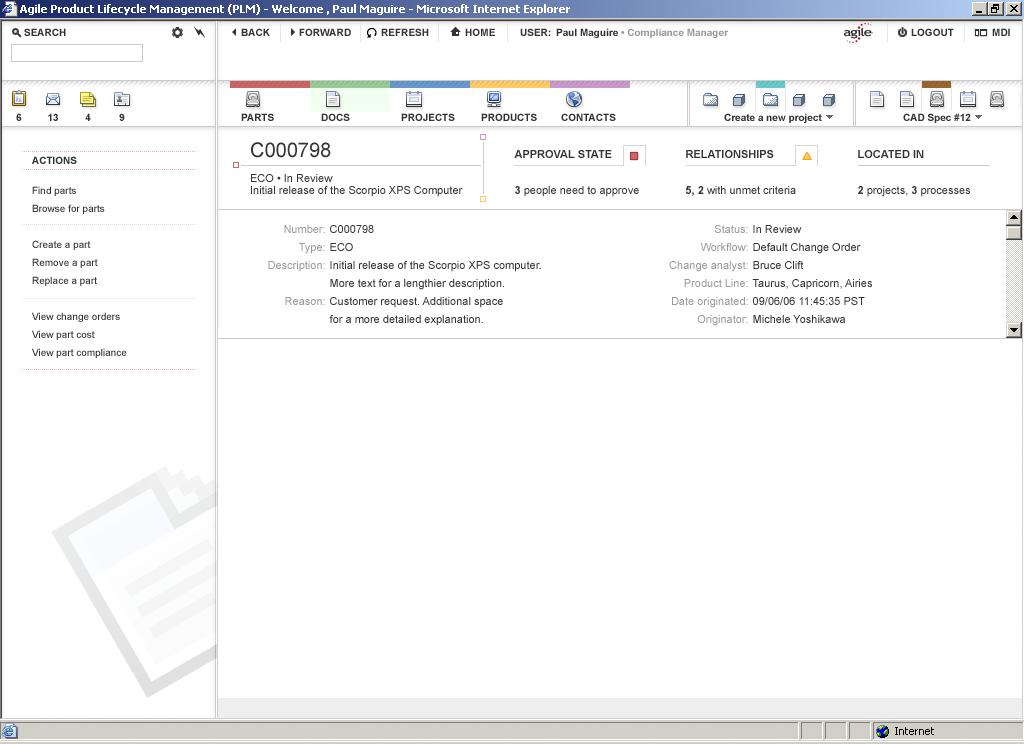
<style>
.page{position:relative;width:1024px;height:744px;background:#ffffff}
.page>*{position:absolute;margin:0}
.t1{font:20px "ArialMT";color:#333333}
.t2{font:11px/32px "ArialMT";color:#333333}
.t3{font:11px/32px "Arial-BoldMT";color:#333333}
.t4{font:10px "Arial-BoldMT";color:#333333}
.t5{font:11px/6px "ArialMT";color:#333333}
.t6{font:10px/18px "ArialMT";color:#333333}
.t7{font:11px/18px "ArialMT"}
.t8{font:11px/18px "ArialMT";color:#333333}
.t9{font:11px/18px "ArialMT";color:#999999}
</style>
<div class="page">
<p class="t1" style="left:251px;top:142px;width:80px;height:16px">C000798</p>
<p class="t2" style="left:514px;top:150px;width:125px;height:47px"><span class="t3">APPROVAL STATE<br>3</span> people need to approve</p>
<p class="t2" style="left:685px;top:150px;width:111px;height:46px"><span class="t3">RELATIONSHIPS<br>5, 2</span> with unmet criteria</p>
<p class="t3" style="left:858px;top:150px;width:112px;height:47px">LOCATED IN<br>2<span class="t2"> projects, </span>3<span class="t2"> processes</span></p>
<p class="t4" style="left:32px;top:156px;width:45px;height:8px">ACTIONS</p>
<p class="t5" style="left:251px;top:174px;width:212px;height:23px">ECO • In Review<br>Initial release of the Scorpio XPS Computer</p>
<p class="t6" style="left:32px;top:186px;width:95px;height:172px">Find parts<br>Browse for parts<br><br>Create a part<br>Remove a part<br>Replace a part<br><br>View change orders<br>View part cost<br>View part compliance</p>
<p class="t7" style="left:258px;top:225px;width:67px;height:137px;text-align:right">Number:<br>Type:<br>Description:<br><br>Reason:<br><br>Reason code:<br>Category:</p>
<p class="t8" style="left:329px;top:225px;width:212px;height:134px">C000798<br>ECO<br>Initial release of the Scorpio XPS computer.<br>More text for a lengthier description.<br>Customer request. Additional space<br>for a more detailed explanation.<br>New release<br>Routine</p>
<p class="t9" style="left:669px;top:225px;width:79px;height:137px;text-align:right">Status:<br>Workflow:<br>Change analyst:<br>Product Line:<br>Date originated:<br>Originator:<br>Date released:<br>Date completed:</p>
<p class="t8" style="left:752px;top:225px;width:120px;height:98px">In Review<br>Default Change Order<br>Bruce Clift<br>Taurus, Capricorn, Airies<br>09/06/06 11:45:35 PST<br>Michele Yoshikawa</p>
</div>
